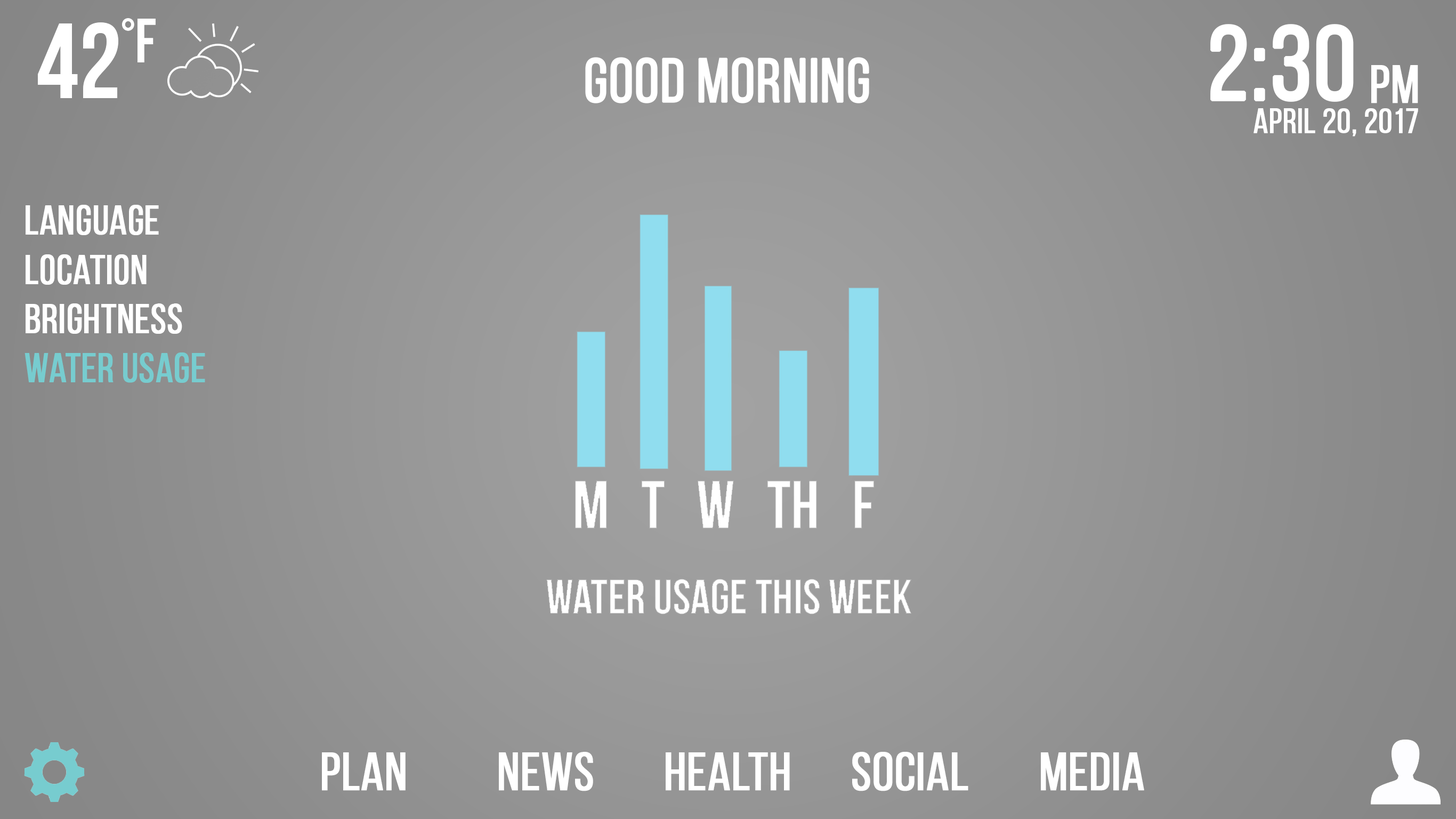
<style>
.page{position:relative;width:1456px;height:819px}
.page>*{position:absolute;margin:0}
.t1{font:105.5px "BebasNeueRegular";color:#ffffff;font-weight:bold}
.t2{font:61.3px "BebasNeueRegular";color:#ffffff;font-weight:bold}
.t3{font:53.3px "BebasNeueRegular";color:#ffffff;font-weight:bold}
.t4{font:34.6px "BebasNeueRegular";color:#ffffff;font-weight:bold}
.t5{font:41px "BebasNeueRegular";color:#ffffff;font-weight:bold}
.t6{font:41px "BebasNeueRegular";color:#77cccf;font-weight:bold}
.t7{font:53.3px "BebasNeueRegular";color:#feffff;font-weight:bold}
.t8{font:53.3px "BebasNeueRegular";color:#fefefe;font-weight:bold}
</style>
<div class="page">
<p class="t1" style="left:1211px;top:24px;width:143px;height:78px">2:30</p>
<p class="t2" style="left:585px;top:57px;width:284px;height:46px">GOOD Morning</p>
<p class="t3" style="left:1372px;top:65px;width:46px;height:38px">PM</p>
<p class="t4" style="left:1254px;top:108px;width:164px;height:28px">April 20, 2017</p>
<p class="t5" style="left:25px;top:205px;width:180px;height:178px">Language<br>Location<br>Brightness<br><span class="t6">water usage</span></p>
<p class="t3" style="left:322px;top:752px;width:84px;height:39px">PLAN</p>
<p class="t3" style="left:499px;top:752px;width:94px;height:39px">NEWS</p>
<p class="t7" style="left:666px;top:752px;width:124px;height:39px">HEALTH</p>
<p class="t3" style="left:852px;top:752px;width:117px;height:39px">SOCIAL</p>
<p class="t8" style="left:1041px;top:752px;width:103px;height:39px">MEDIA</p>
</div>
